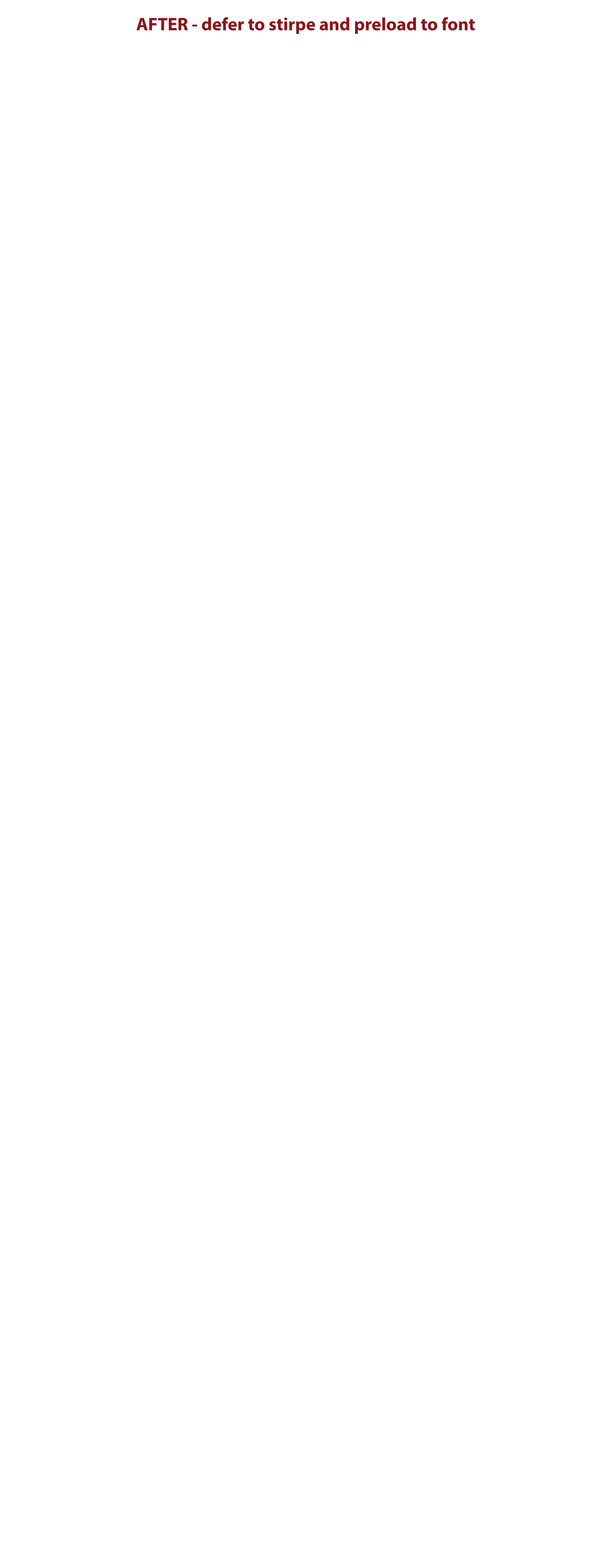
<style>
.page{position:relative;width:612px;height:1568px;background:#ffffff}
.page>*{position:absolute;margin:0}
.t1{font:18.2px "MyriadPro-Bold";color:#8f131a}
</style>
<div class="page">
<p class="t1" style="left:136px;top:17px;width:339px;height:17px">AFTER - defer to stirpe and preload to font</p>
</div>
